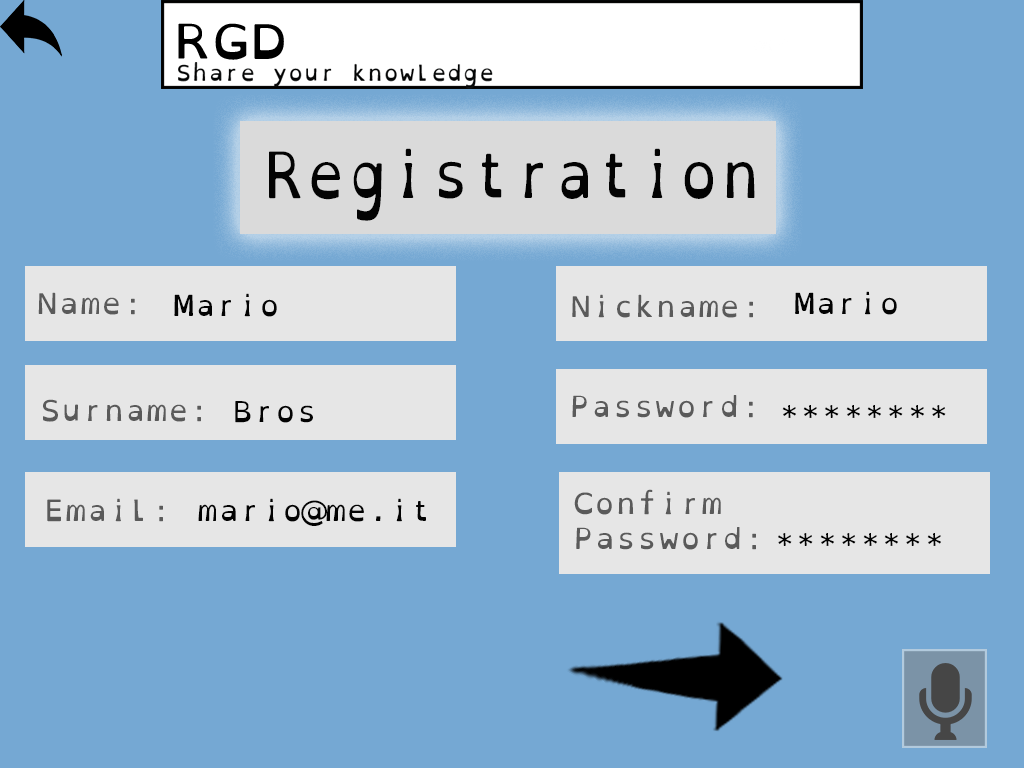
<style>
.page{position:relative;width:1024px;height:768px;background:#75a8d3}
.page>*{position:absolute;margin:0}
.t1{font:64.2px "OpenDyslexicMono-Regular";color:#030303;scale:0.88 1}
.t2{font:29.2px "OpenDyslexicMono-Regular";color:#5a5a5a}
.t3{font:29.2px "OpenDyslexicMono-Regular";color:#030303}
</style>
<div class="page">
<p class="t1" style="left:269px;top:148px;width:486px;height:73px">Registration</p>
<p class="t2" style="left:38px;top:292px;width:97px;height:23px">Name:</p>
<p class="t3" style="left:174px;top:293px;width:103px;height:24px">Mario</p>
<p class="t2" style="left:572px;top:294px;width:181px;height:24px">Nickname:</p>
<p class="t3" style="left:795px;top:291px;width:102px;height:24px">Mario</p>
<p class="t2" style="left:43px;top:399px;width:158px;height:23px">Surname:</p>
<p class="t3" style="left:235px;top:401px;width:78px;height:22px">Bros</p>
<p class="t2" style="left:572px;top:395px;width:181px;height:23px">Password:</p>
<p class="t3" style="left:782px;top:405px;width:164px;height:13px">********</p>
<p class="t2" style="left:574px;top:489px;width:182px;height:61px">Confirm <br>Password:</p>
<p class="t2" style="left:47px;top:498px;width:116px;height:24px">Email:</p>
<p class="t3" style="left:198px;top:498px;width:228px;height:28px">mario@me.it</p>
<p class="t3" style="left:778px;top:533px;width:163px;height:13px">********</p>
</div>
